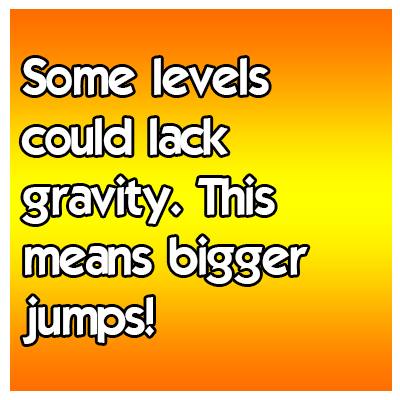
<style>
.page{position:relative;width:400px;height:400px}
.page>*{position:absolute;margin:0}
.t1{font:50px "ELEGANCE";color:#ffffff}
</style>
<div class="page">
<p class="t1" style="left:21px;top:58px;width:287px;height:286px">Some levels<br>could lack<br>gravity. This<br>means bigger<br>jumps!</p>
</div>
